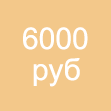
<style>
.page{position:relative;width:111px;height:111px;background:#f3c88a}
.page>*{position:absolute;margin:0}
.t1{font:30px "ArialMT";color:#ffffff}
</style>
<div class="page">
<p class="t1" style="left:23px;top:27px;width:65px;height:23px">6000</p>
<p class="t1" style="left:33px;top:58px;width:47px;height:29px">руб</p>
</div>
